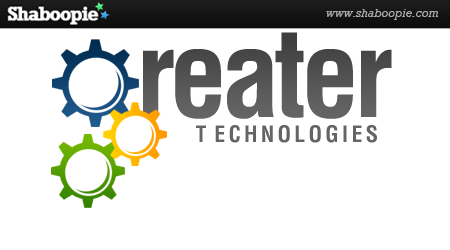
<style>
.page{position:relative;width:450px;height:250px;background:#ffffff}
.page>*{position:absolute;margin:0}
.t1{font:117.3px "Helvetica-CondensedBold";letter-spacing:-0.05em;color:#464646}
.t2{font:22px "Helvetica-CondensedBold";letter-spacing:-0.05em;color:#646464}
</style>
<div class="page">
<p class="t1" style="left:143px;top:32px;width:249px;height:87px">reater</p>
<p class="t2" style="left:196px;top:125px;width:181px;height:18px">T  E C H N O L O G I E S</p>
</div>
